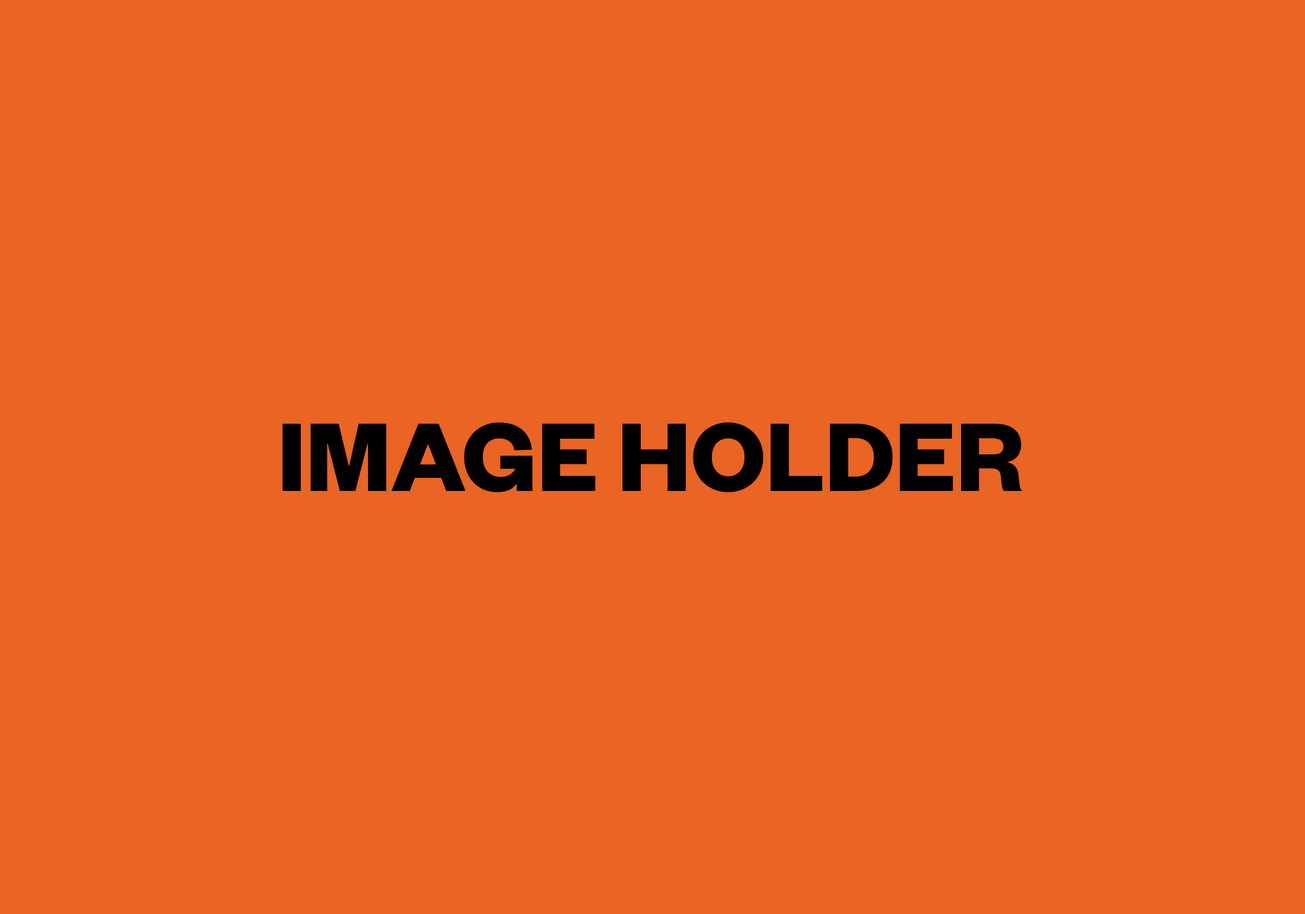
<style>
.page{position:relative;width:1305px;height:914px;background:#ea6423}
.page>*{position:absolute;margin:0}
.t1{font:107px "FoundersGrotesk-Bold";color:#000000}
</style>
<div class="page">
<p class="t1" style="left:283px;top:422px;width:740px;height:70px">IMAGE HOLDER</p>
</div>
